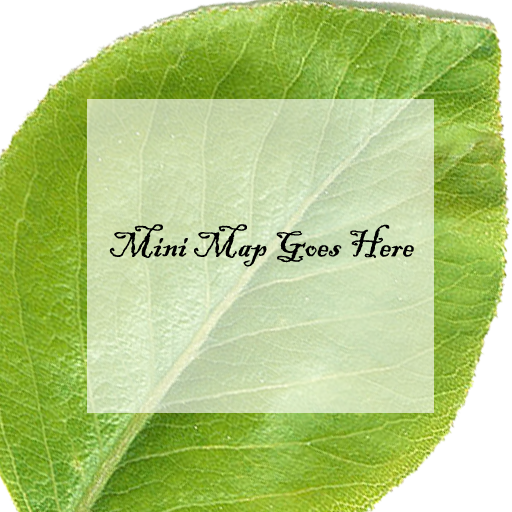
<style>
.page{position:relative;width:512px;height:512px}
.page>*{position:absolute;margin:0}
.t1{font:37.8px "BlackadderITC-Regular";color:#000000}
</style>
<div class="page">
<p class="t1" style="left:109px;top:224px;width:305px;height:43px">Mini Map Goes Here</p>
</div>
